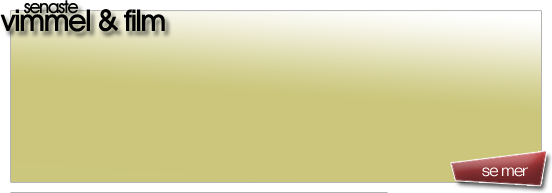
<style>
.page{position:relative;width:552px;height:193px;background:#cbc67c}
.page>*{position:absolute;margin:0}
.t1{font:30px/18px "AvantGardeITCbyBT-Medium";letter-spacing:-0.075em;color:#000000;font-weight:bold}
.t2{font:18px/18px "AvantGardeITCbyBT-Medium";letter-spacing:-0.075em;color:#000000}
.t3{font:18px "FolioBT-Light";letter-spacing:-0.075em;color:#ffffff}
</style>
<div class="page">
<p class="t1" style="left:0px;top:0px;width:165px;height:32px;text-align:center"><span class="t2">         senaste<br></span>              vimmel &amp; film</p>
<p class="t3" style="left:482px;top:167px;width:46px;height:10px">se mer</p>
</div>
